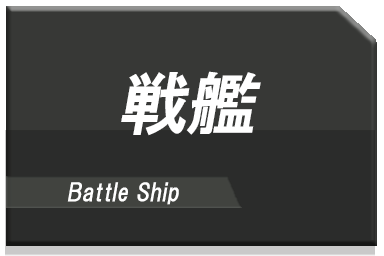
<style>
.page{position:relative;width:384px;height:256px;background:#373836}
.page>*{position:absolute;margin:0}
.t1{font:68px "HGPGothicE";color:#ffffff;font-style:italic}
.t2{font:24px "HGPGothicE";color:#ffffff;font-style:italic}
</style>
<div class="page">
<p class="t1" style="left:121px;top:71px;width:140px;height:65px">戦艦</p>
<p class="t2" style="left:67px;top:182px;width:112px;height:23px">Battle Ship</p>
</div>
